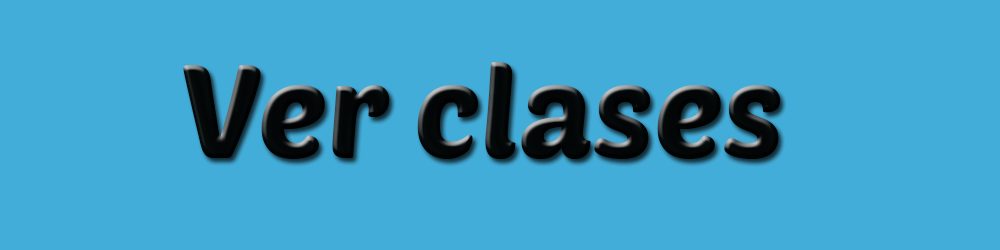
<style>
.page{position:relative;width:1000px;height:250px;background:#43add9}
.page>*{position:absolute;margin:0}
.t1{font:130px "PoetsenOne-Regular";color:#050a0b}
</style>
<div class="page">
<p class="t1" style="left:183px;top:62px;width:598px;height:97px">Ver clases</p>
</div>
